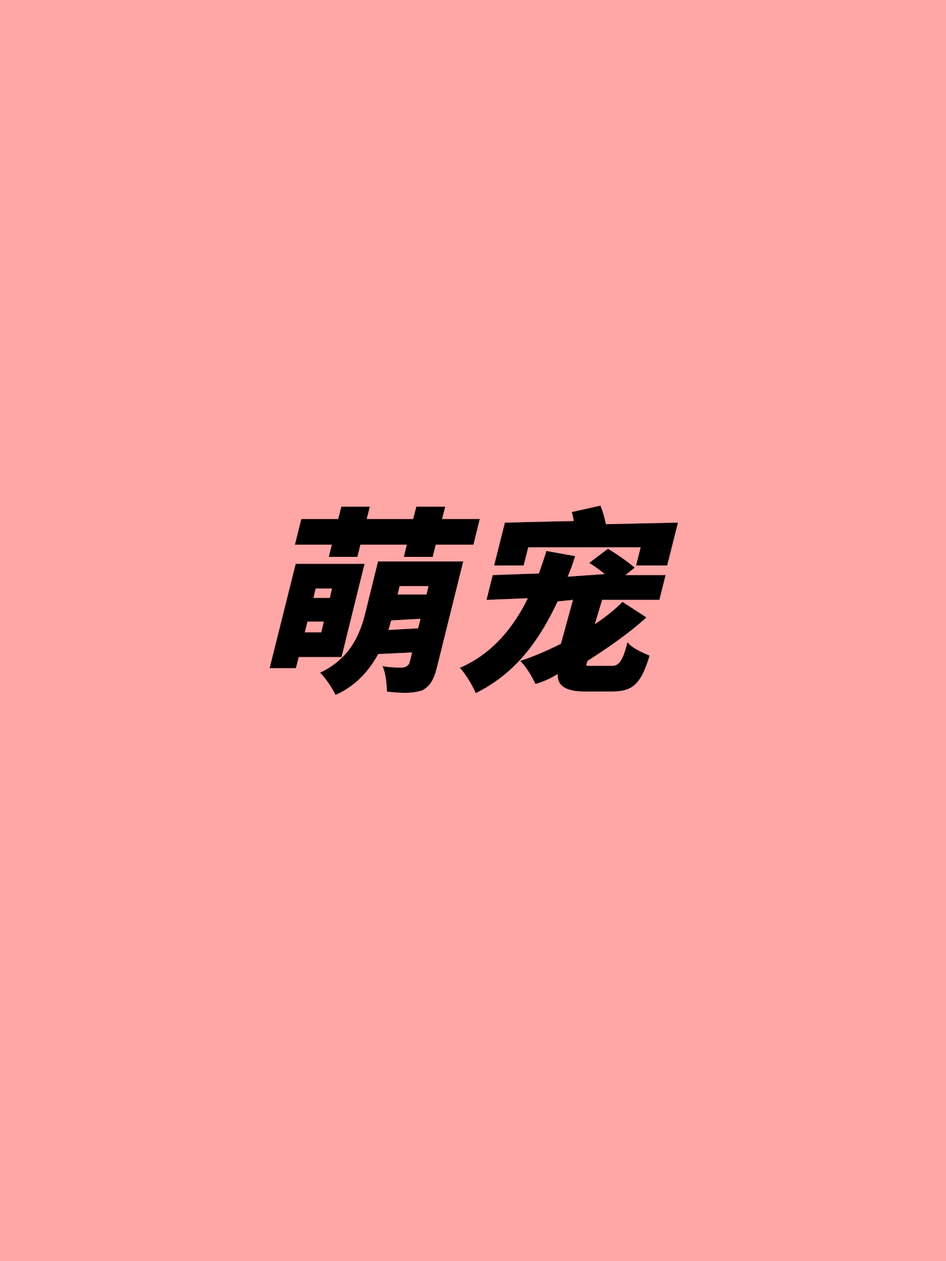
<style>
.page{position:relative;width:946px;height:1261px;background:#ffa6a6}
.page>*{position:absolute;margin:0}
.t1{font:199.5px "Source-KeynoteartHans-Regular";color:#000000}
</style>
<div class="page">
<p class="t1" style="left:269px;top:505px;width:409px;height:190px">萌宠</p>
</div>
